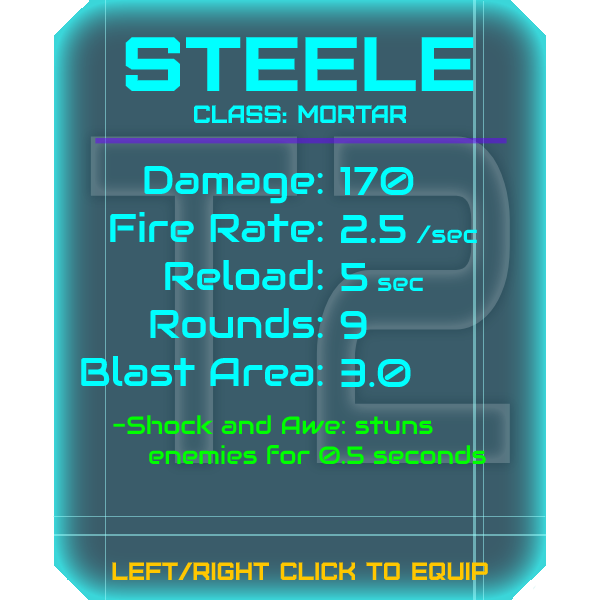
<style>
.page{position:relative;width:600px;height:600px;background:#3a5c6a}
.page>*{position:absolute;margin:0}
.t1{font:76.8px "Furore";color:#00ffff;scale:1.13 1}
.t2{font:25px "Furore";color:#00ffff}
.t3{font:40px "Audiowide-Regular";color:#00ffff}
.t4{font:25px "Audiowide-Regular";color:#00ffff}
.t5{font:25px "Audiowide-Regular";color:#00ff00}
.t6{font:25px "Furore";color:#ffc700}
</style>
<div class="page">
<p class="t1" style="left:125px;top:37px;width:349px;height:54px">steele</p>
<p class="t2" style="left:194px;top:105px;width:212px;height:18px">Class: mortar</p>
<p class="t3" style="left:81px;top:165px;width:242px;height:221px;text-align:right">Damage:<br>Fire Rate:<br>Reload:<br>Rounds:<br>Blast Area:</p>
<p class="t3" style="left:340px;top:166px;width:137px;height:221px">170<br>2.5 <span class="t4">/sec<br></span>5 <span class="t4">sec<br></span>9<br>3.0</p>
<p class="t5" style="left:113px;top:415px;width:373px;height:49px">-Shock and Awe: stuns<br> enemies for 0.5 seconds</p>
<p class="t6" style="left:112px;top:562px;width:376px;height:18px">left/right click to equip</p>
</div>
